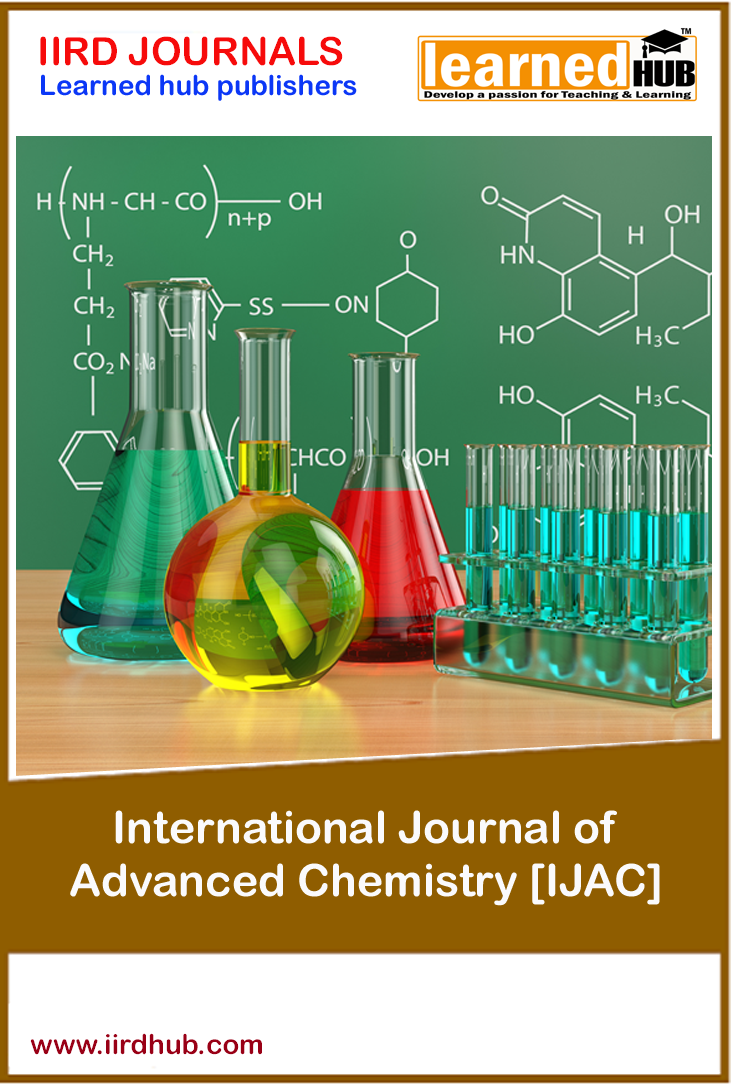
<style>
.page{position:relative;width:731px;height:1085px}
.page>*{position:absolute;margin:0}
.t1{font:38.9px "ArialRoundedMTBold";color:#f60b0b}
.t2{font:27.8px "ArialRoundedMTBold";color:#0b37f6}
.t3{font:44.4px "ArialRoundedMTBold";color:#fafafc}
.t4{font:27.8px "ArialRoundedMTBold";color:#990016}
</style>
<div class="page">
<p class="t1" style="left:40px;top:36px;width:303px;height:30px">IIRD JOURNALS</p>
<p class="t2" style="left:41px;top:74px;width:316px;height:27px">Learned hub publishers</p>
<p class="t3" style="left:70px;top:810px;width:590px;height:96px;text-align:center">International Journal of <br>Advanced Chemistry [IJAC]</p>
<p class="t4" style="left:30px;top:1033px;width:232px;height:22px">www.iirdhub.com</p>
</div>
